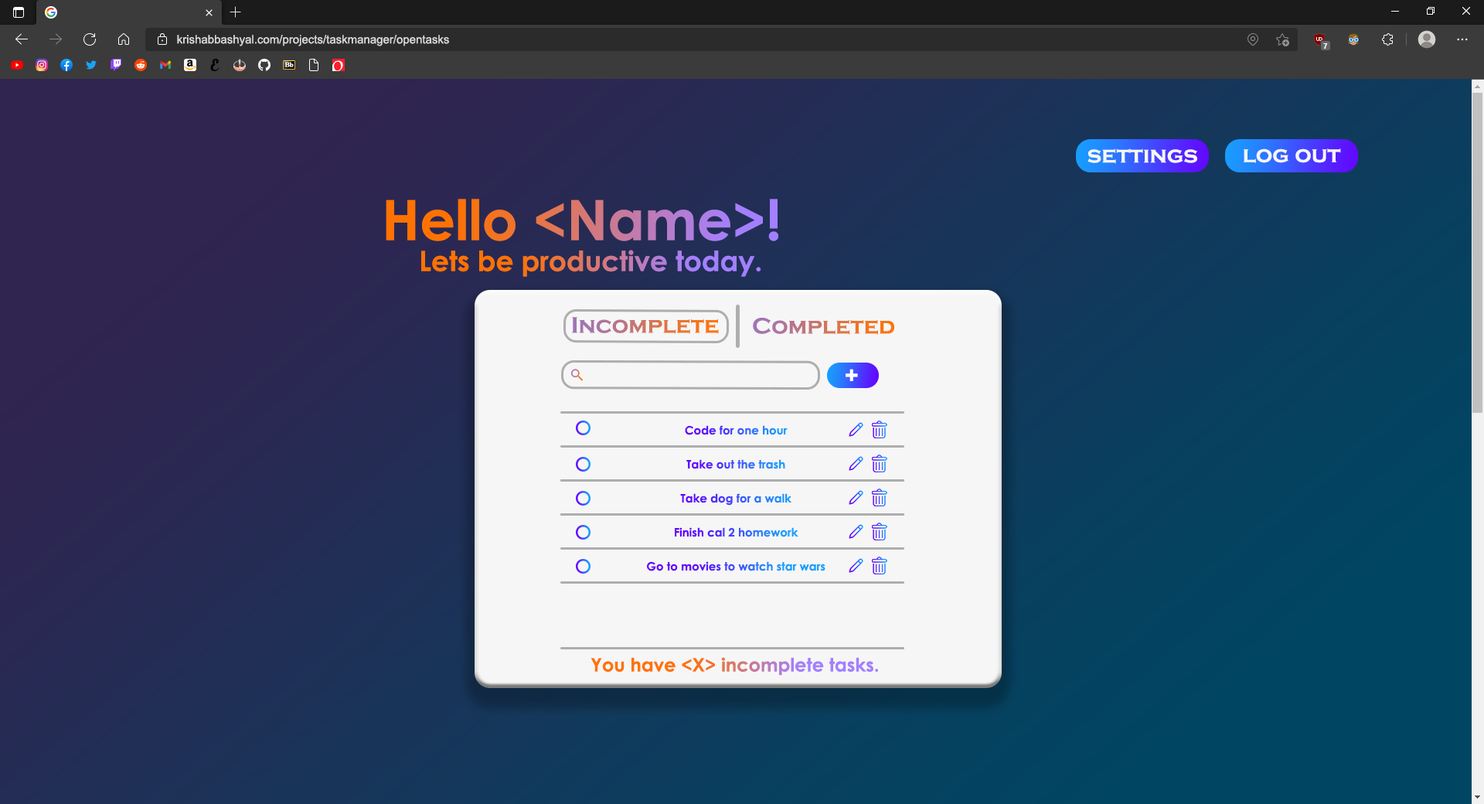
<style>
.page{position:relative;width:1484px;height:804px}
.page>*{position:absolute;margin:0}
.t1{font:11.6px "ArialMT";color:#dbdbdb}
.t2{font:23.2px "CopperplateGothic-Bold";color:#f6f6f6}
.t3{font:55.6px "CenturyGothic-Bold"}
.t4{font:27.8px "CenturyGothic-Bold"}
.t5{font:23.2px "CopperplateGothic-Bold"}
.t6{font:24.1px "CenturyGothic-Bold";color:#ffffff}
.t7{font:11.6px "CenturyGothic-Bold"}
.t8{font:18.5px "CenturyGothic-Bold"}
</style>
<div class="page">
<p class="t1" style="left:177px;top:35px;width:272px;height:11px">krishabbashyal.com/projects/taskmanager/opentasks</p>
<p class="t2" style="left:1087px;top:148px;width:110px;height:16px">settings</p>
<p class="t2" style="left:1243px;top:148px;width:98px;height:15px">log out</p>
<p class="t3" style="left:386px;top:199px;width:392px;height:42px">Hello &lt;Name&gt;!</p>
<p class="t4" style="left:421px;top:250px;width:340px;height:27px">Lets be productive today.</p>
<p class="t5" style="left:572px;top:317px;width:147px;height:17px">Incomplete</p>
<p class="t5" style="left:753px;top:318px;width:141px;height:17px">Completed</p>
<p class="t6" style="left:845px;top:369px;width:13px;height:12px">+</p>
<p class="t7" style="left:685px;top:425px;width:102px;height:10px">Code for one hour</p>
<p class="t7" style="left:686px;top:459px;width:99px;height:10px">Take out the trash</p>
<p class="t7" style="left:680px;top:493px;width:112px;height:12px">Take dog for a walk</p>
<p class="t7" style="left:675px;top:527px;width:123px;height:10px">Finish cal 2 homework</p>
<p class="t7" style="left:647px;top:561px;width:178px;height:10px">Go to movies to watch star wars</p>
<p class="t8" style="left:590px;top:657px;width:289px;height:18px">You have &lt;X&gt; incomplete tasks.</p>
</div>
